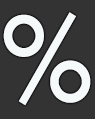
<style>
.page{position:relative;width:95px;height:119px;background:#333333}
.page>*{position:absolute;margin:0}
.t1{font:120px "Avenir-Roman";letter-spacing:0.025em;color:#f5f9f9;text-transform:uppercase;scale:0.95 1}
</style>
<div class="page">
<p class="t1" style="left:3px;top:12px;width:88px;height:94px">%</p>
</div>
